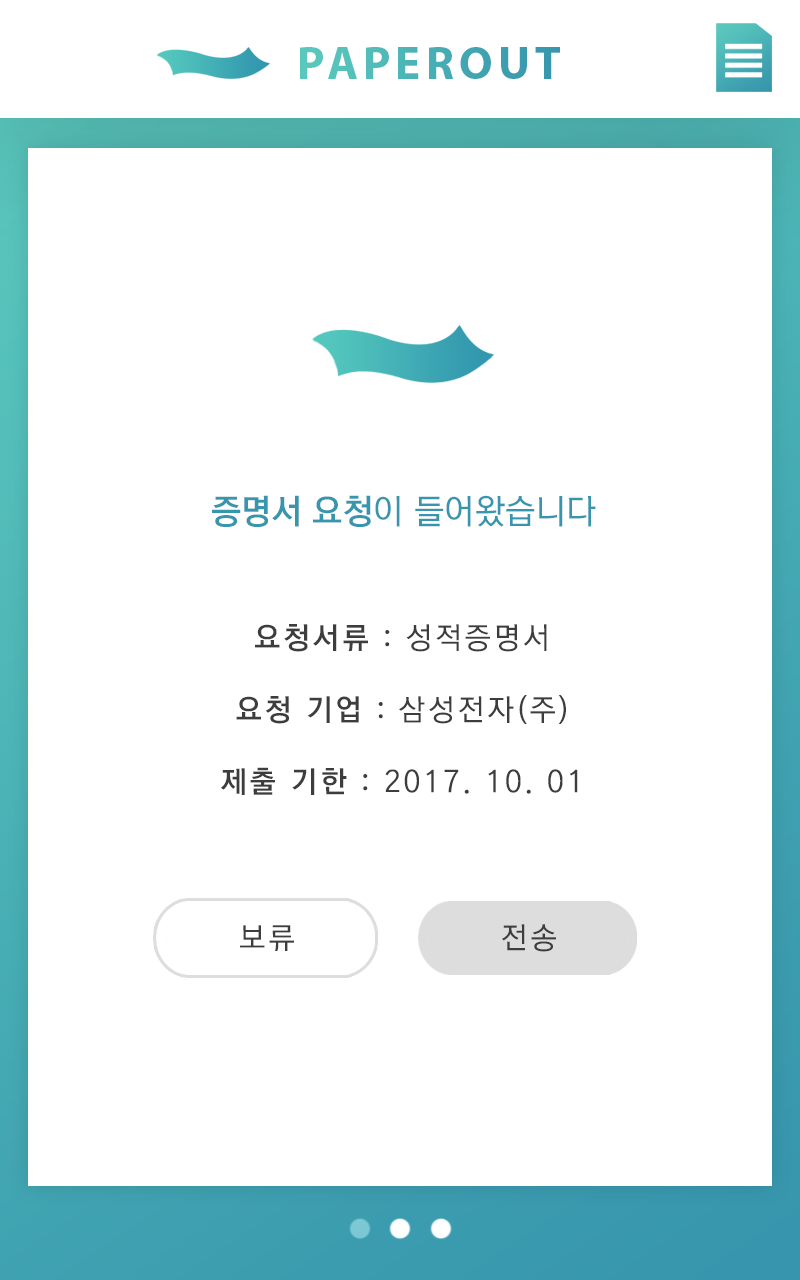
<style>
.page{position:relative;width:800px;height:1280px;background:#ffffff}
.page>*{position:absolute;margin:0}
.t1{font:46.9px "MyriadPro-Bold";letter-spacing:0.11em;color:#49afb5}
.t2{font:34.6px "KoreanGD13-R";color:#3796ad}
.t3{font:34.6px "KoreanGD15-R";color:#3796ad}
.t4{font:30px "KoreanGD13-R";letter-spacing:0.1em;color:#3d3d3d}
.t5{font:30px "KoreanGD15-R";letter-spacing:0.1em;color:#3d3d3d}
</style>
<div class="page">
<p class="t1" style="left:300px;top:47px;width:260px;height:32px">PAPEROUT</p>
<p class="t2" style="left:212px;top:495px;width:384px;height:32px"><span class="t3">증명서 요청</span>이 들어왔습니다</p>
<p class="t4" style="left:221px;top:624px;width:357px;height:171px;text-align:center"><span class="t5">요청서류</span> : 성적증명서<br><br><span class="t5">요청 기업</span> : 삼성전자(주)<br><br><span class="t5">제출 기한</span> : 2017. 10. 01</p>
<p class="t4" style="left:240px;top:925px;width:54px;height:26px">보류</p>
<p class="t4" style="left:502px;top:924px;width:54px;height:28px">전송</p>
</div>
